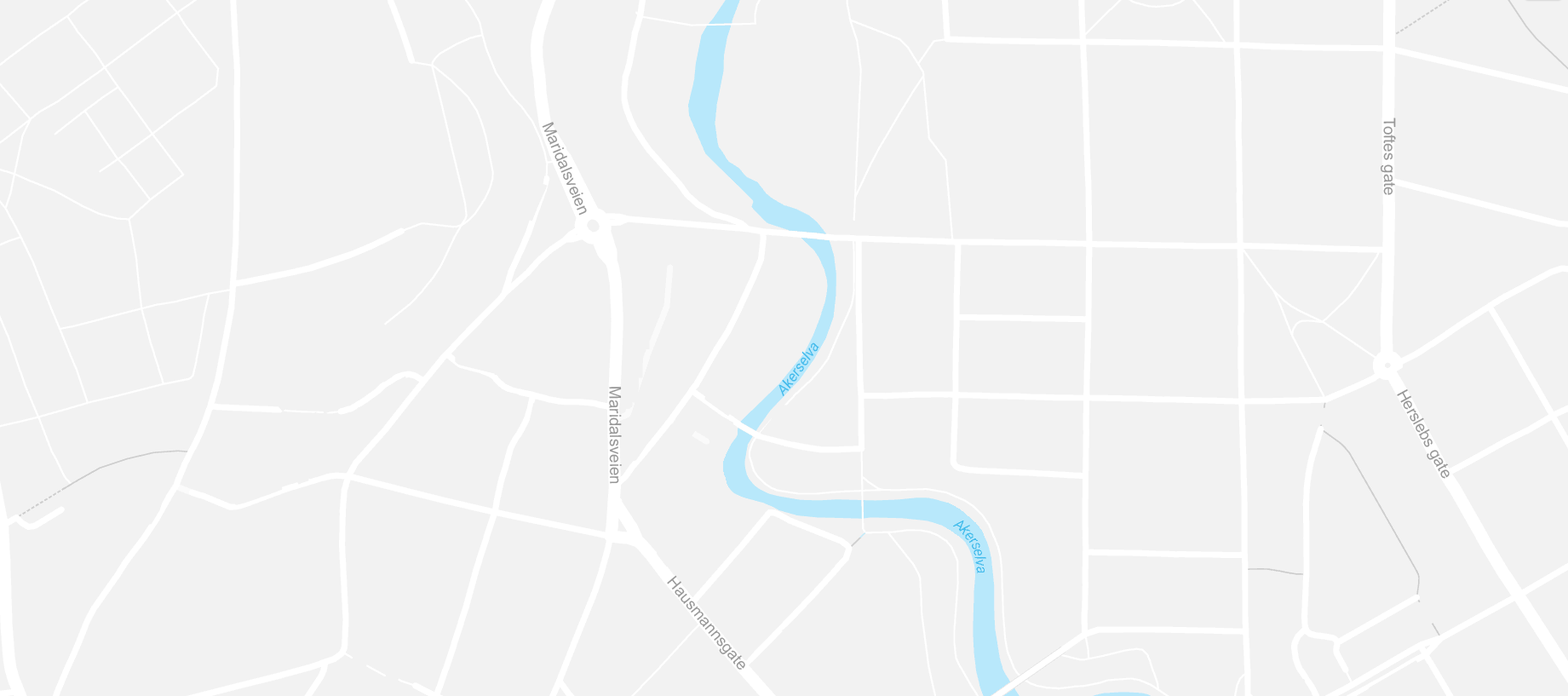
<style>
.page{position:relative;width:1568px;height:696px;background:#f2f2f2}
.page>*{position:absolute;margin:0}
.t1{font:15.9px "ArialMT";color:#979797}
</style>
<div class="page">
<p class="t1" style="left:542px;top:122px;width:45px;height:93px;rotate:67deg">Maridalsveien</p>
<p class="t1" style="left:1380px;top:118px;width:16px;height:77px;rotate:90deg">Toftes gate</p>
<p class="t1" style="left:609px;top:387px;width:13px;height:97px;rotate:90deg">Maridalsveien</p>
<p class="t1" style="left:1397px;top:389px;width:53px;height:90px;rotate:61deg">Herslebs gate</p>
<p class="t1" style="left:667px;top:575px;width:78px;height:94px;rotate:50deg">Hausmannsgate</p>
</div>
